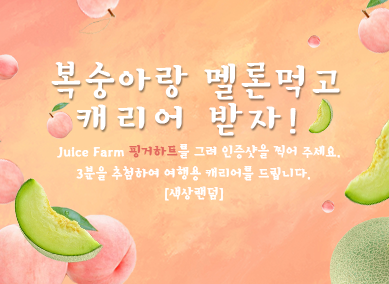
<style>
.page{position:relative;width:389px;height:284px}
.page>*{position:absolute;margin:0}
.t1{font:40px/38px "Stylish-Regular";letter-spacing:0.04em;color:#ffffff;font-weight:bold}
.t2{font:40px/38px "Stylish-Regular";letter-spacing:0.08em;color:#ffffff;font-weight:bold}
.t3{font:40px/38px "Stylish-Regular";letter-spacing:0.14em;color:#ffffff;font-weight:bold}
.t4{font:15px "Stylish-Regular";color:#ffffff;font-weight:bold}
.t5{font:15px "Stylish-Regular";color:#e2685d;font-weight:bold}
</style>
<div class="page">
<p class="t1" style="left:51px;top:61px;width:289px;height:75px;text-align:center">복숭아랑 멜론<span class="t2">먹고<br></span><span class="t3">캐리어 받자!</span></p>
<p class="t4" style="left:57px;top:144px;width:283px;height:15px">Juice Farm <span class="t5">핑거하트</span>를 그려 인증샷을 찍어 주세요.</p>
<p class="t4" style="left:76px;top:166px;width:235px;height:15px">3분을 추첨하여 여행용 캐리어를 드립니다.</p>
<p class="t4" style="left:165px;top:186px;width:59px;height:15px">[색상랜덤]</p>
</div>
